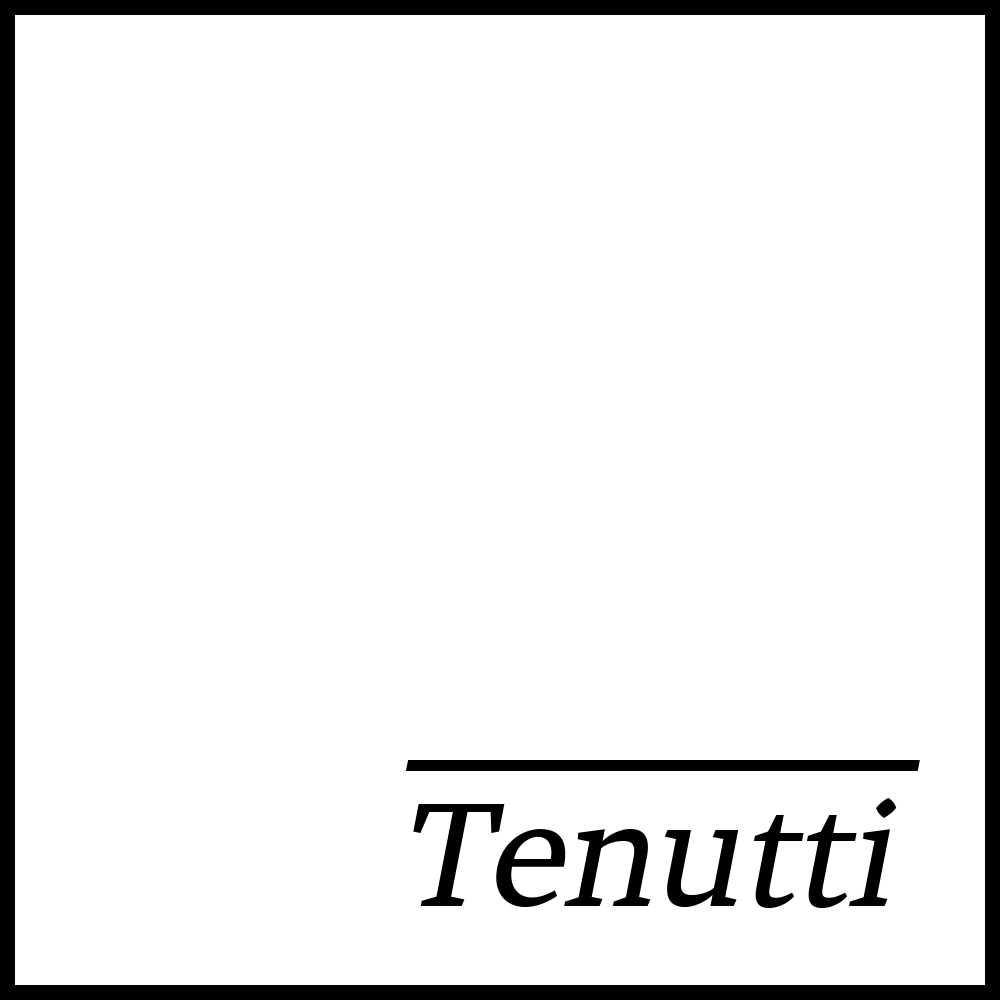
<style>
.page{position:relative;width:1000px;height:1000px;background:#ffffff}
.page>*{position:absolute;margin:0}
.t1{font:145.8px "Brawler";letter-spacing:-0.025em;color:#000000;font-style:italic}
</style>
<div class="page">
<p class="t1" style="left:405px;top:760px;width:515px;height:11px">_______</p>
<p class="t1" style="left:413px;top:798px;width:484px;height:111px">Tenutti</p>
</div>
